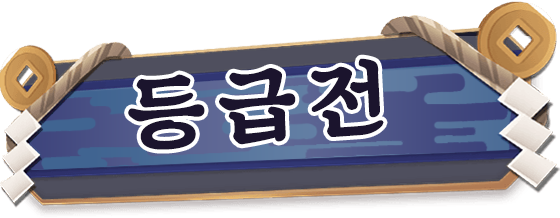
<style>
.page{position:relative;width:560px;height:218px;background:#ffffff}
.page>*{position:absolute;margin:0}
.t1{font:83.3px "SDKukdetopokki-aLt";letter-spacing:0.14em;color:#1b142d;font-weight:bold}
</style>
<div class="page">
<p class="t1" style="left:128px;top:58px;width:256px;height:92px;rotate:-4deg">등급전</p>
</div>
